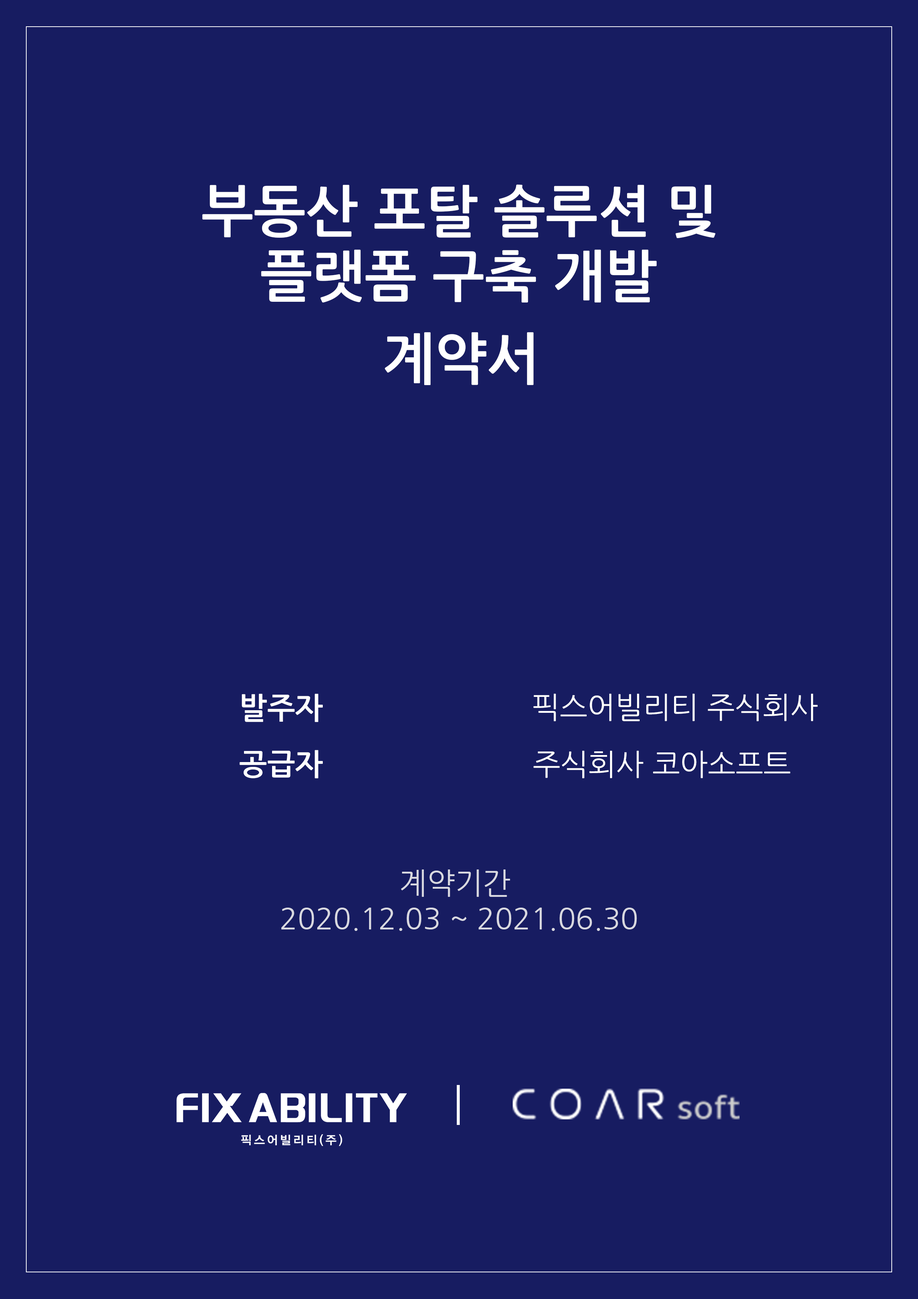
<style>
.page{position:relative;width:918px;height:1299px;background:#171c61}
.page>*{position:absolute;margin:0}
.t1{font:55.6px "NanumGothicBold";color:#ffffff}
.t2{font:55.4px "NanumGothicBold";color:#ffffff}
.t3{font:29.6px "NanumGothicBold";color:#ffffff}
.t4{font:29.6px "NanumGothic";color:#ffffff}
.t5{font:29.6px "NanumGothic";color:#d8d8e0}
</style>
<div class="page">
<p class="t1" style="left:202px;top:184px;width:514px;height:54px">부동산 포탈 솔루션 및</p>
<p class="t1" style="left:261px;top:250px;width:396px;height:52px">플랫폼 구축 개발</p>
<p class="t2" style="left:385px;top:332px;width:149px;height:53px">계약서</p>
<p class="t3" style="left:242px;top:693px;width:81px;height:29px">발주자</p>
<p class="t4" style="left:533px;top:693px;width:285px;height:28px">픽스어빌리티 주식회사</p>
<p class="t3" style="left:240px;top:750px;width:83px;height:28px">공급자</p>
<p class="t4" style="left:533px;top:750px;width:257px;height:28px">주식회사 코아소프트</p>
<p class="t5" style="left:281px;top:869px;width:356px;height:62px;text-align:center">계약기간<br> 2020.12.03 ~ 2021.06.30</p>
</div>
